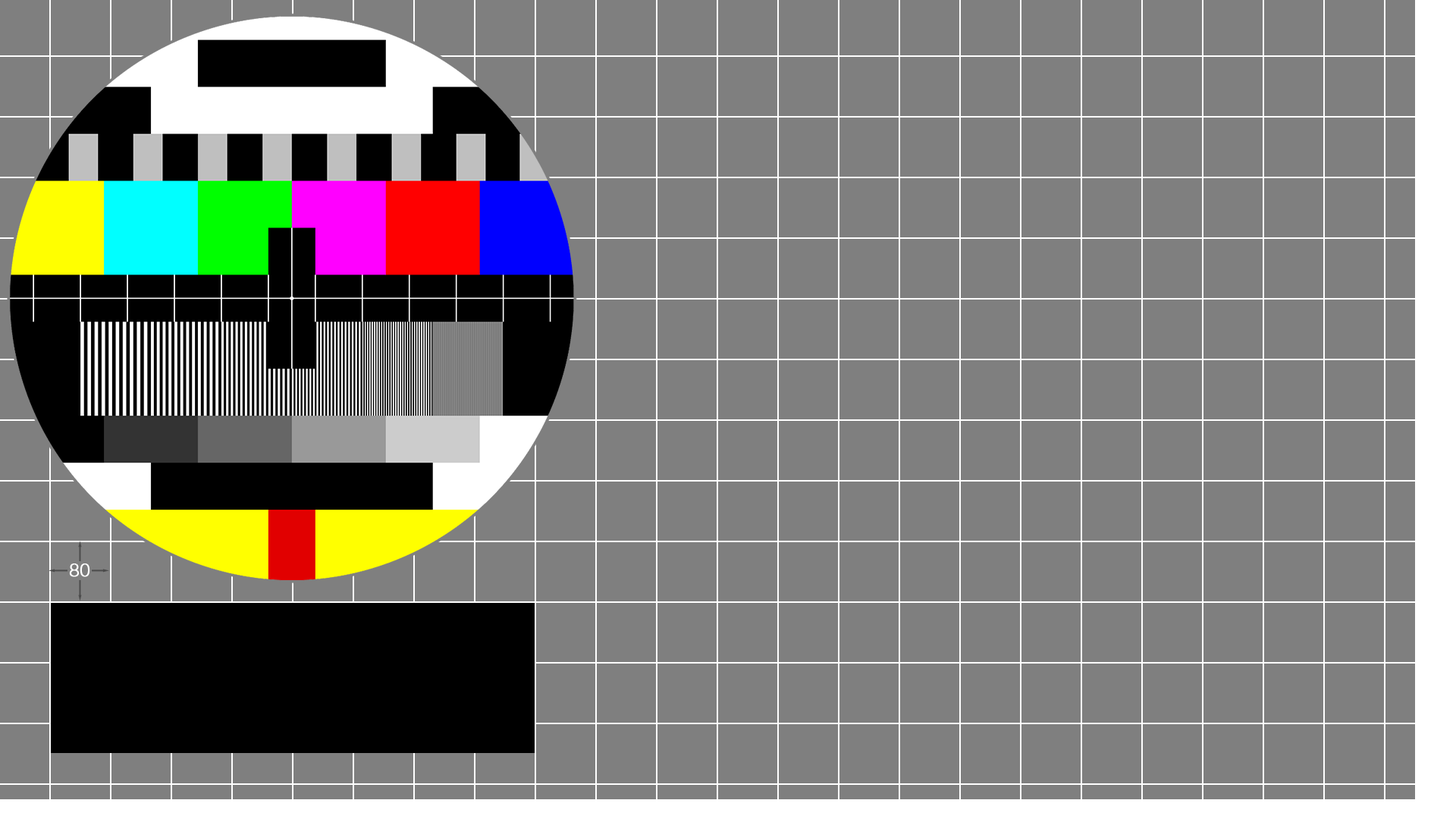
<style>
.page{position:relative;width:1456px;height:819px;background:#7f7f7f}
.page>*{position:absolute;margin:0}
.t1{font:18.2px "HelveticaNeue-Light";color:#ffffff;font-weight:bold}
</style>
<div class="page">
<p class="t1" style="left:69px;top:563px;width:21px;height:14px">80</p>
</div>
